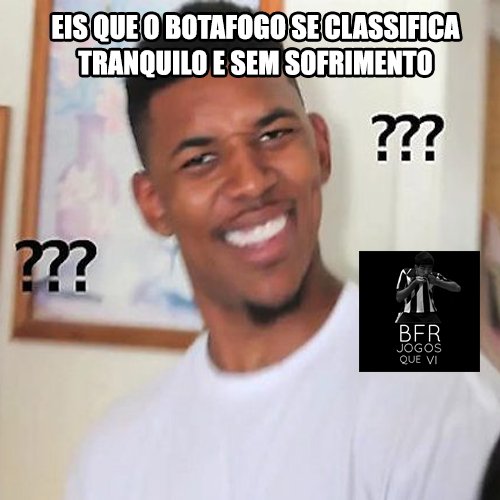
<style>
.page{position:relative;width:500px;height:500px}
.page>*{position:absolute;margin:0}
.t1{font:29.8px "Impact";color:#ffffff}
</style>
<div class="page">
<p class="t1" style="left:52px;top:14px;width:408px;height:64px;text-align:center">EIS QUE O BOTAFOGO SE CLASSIFICA<br>TRANQUILO E SEM SOFRIMENTO</p>
</div>
